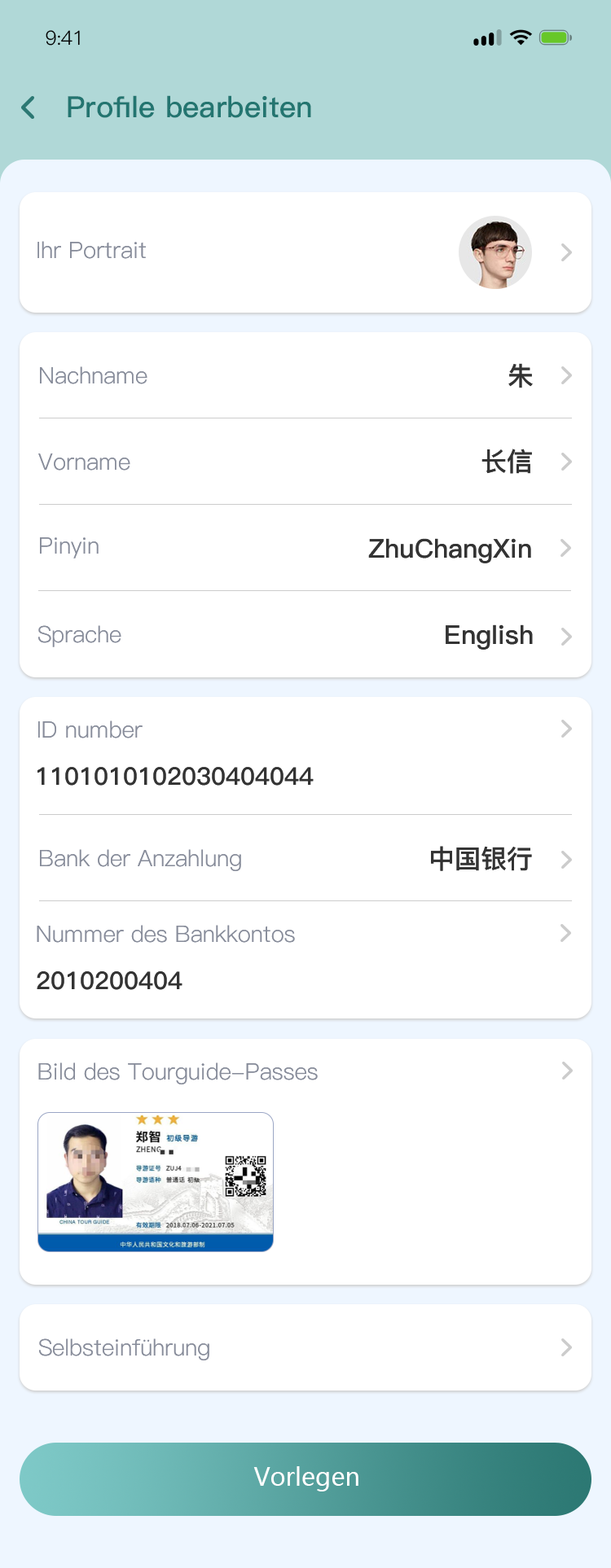
<style>
.page{position:relative;width:611px;height:1568px;background:#ffffff}
.page>*{position:absolute;margin:0}
.t1{font:19.5px "PingFang-SC-Regular";letter-spacing:-0.025em;color:#000000}
.t2{font:29.3px "PingFang-SC-Bold";color:#237570}
.t3{font:22.8px "PingFang-SC-Regular";color:#878c9a}
.t4{font:26.1px "PingFang-SC-Bold";color:#333333;text-transform:uppercase}
.t5{font:22.8px "PingFang-SC-Regular";color:#878c9a;text-transform:uppercase}
.t6{font:26.1px "PingFang-SC-Bold";color:#333333}
.t7{font:24.4px "PingFang-SC-Bold";color:#333333}
.t8{font:24.4px "MicrosoftYaHei";color:#ffffff}
</style>
<div class="page">
<p class="t1" style="left:46px;top:30px;width:34px;height:16px">9:41</p>
<p class="t2" style="left:68px;top:95px;width:243px;height:23px">Profile bearbeiten</p>
<p class="t3" style="left:37px;top:241px;width:109px;height:18px">Ihr Portrait</p>
<p class="t4" style="left:508px;top:363px;width:24px;height:25px">朱</p>
<p class="t3" style="left:40px;top:366px;width:107px;height:18px">Nachname</p>
<p class="t4" style="left:481px;top:449px;width:51px;height:25px">长信</p>
<p class="t3" style="left:38px;top:453px;width:92px;height:18px">Vorname</p>
<p class="t3" style="left:40px;top:537px;width:59px;height:21px"><span class="t5">p</span>inyin</p>
<p class="t6" style="left:368px;top:538px;width:163px;height:25px"><span class="t4">Z</span>huChangXin</p>
<p class="t3" style="left:38px;top:625px;width:83px;height:22px">Sprache</p>
<p class="t6" style="left:445px;top:624px;width:87px;height:26px">English</p>
<p class="t3" style="left:38px;top:720px;width:104px;height:18px"><span class="t5">i</span>D number</p>
<p class="t7" style="left:37px;top:767px;width:276px;height:19px">1101010102030404044</p>
<p class="t6" style="left:431px;top:846px;width:101px;height:25px">中国银行</p>
<p class="t3" style="left:40px;top:849px;width:201px;height:22px">Bank der Anzahlung</p>
<p class="t3" style="left:37px;top:925px;width:258px;height:18px">Nummer des Bankkontos</p>
<p class="t7" style="left:37px;top:971px;width:145px;height:19px">2010200404</p>
<p class="t3" style="left:38px;top:1062px;width:280px;height:22px">Bild des Tourguide-Passes</p>
<p class="t3" style="left:39px;top:1338px;width:170px;height:22px">Selbsteinführung</p>
<p class="t8" style="left:253px;top:1466px;width:105px;height:25px">Vorlegen</p>
</div>
